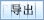
<style>
.page{position:relative;width:44px;height:20px}
.page>*{position:absolute;margin:0}
.t1{font:12px "SimSun"}
</style>
<div class="page">
<p class="t1" style="left:11px;top:4px;width:22px;height:12px">导出</p>
</div>
